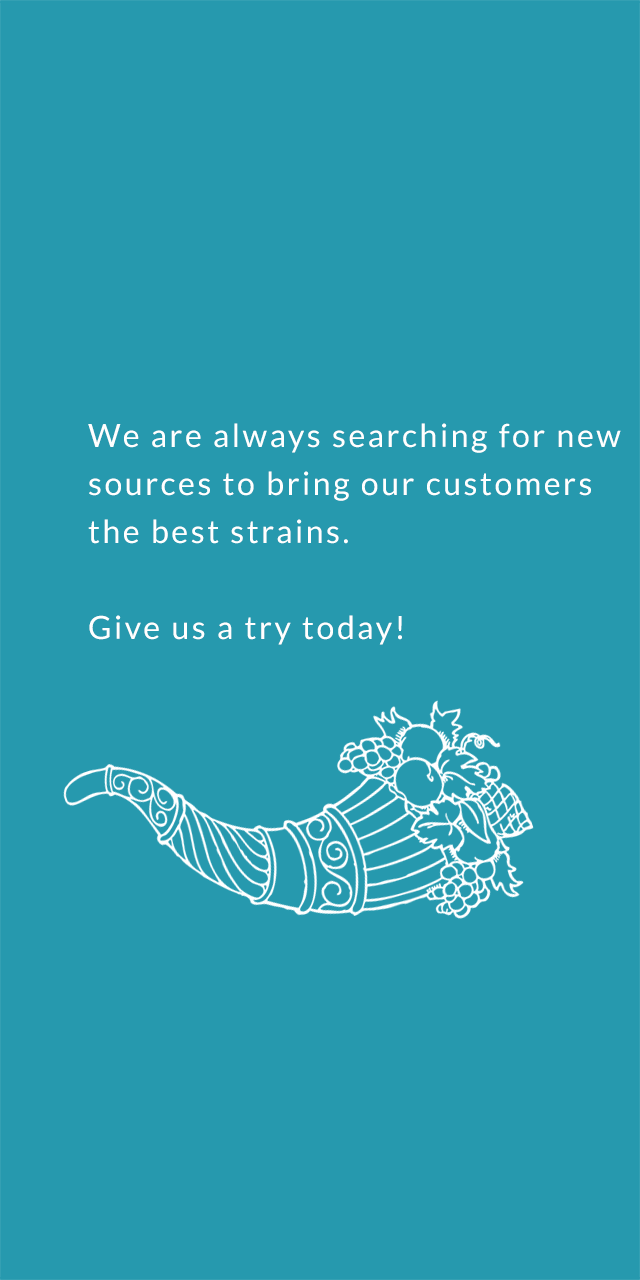
<style>
.page{position:relative;width:640px;height:1280px;background:#2699ae}
.page>*{position:absolute;margin:0}
.t1{font:32px/48px "Lato-Regular";letter-spacing:0.08em;color:#ffffff}
</style>
<div class="page">
<p class="t1" style="left:88px;top:423px;width:533px;height:222px">We are always searching for new <br>sources to bring our customers <br>the best strains.<br><br>Give us a try today!</p>
</div>
